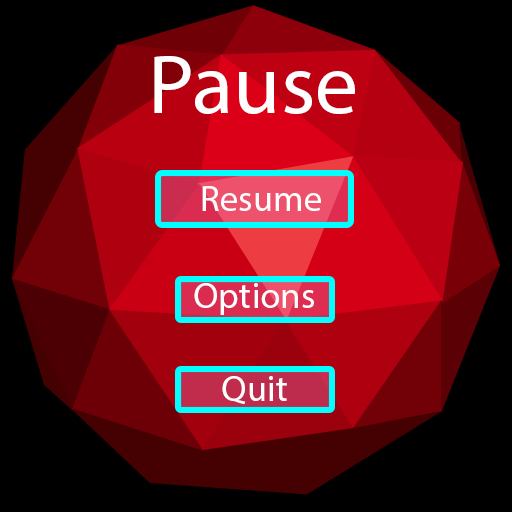
<style>
.page{position:relative;width:512px;height:512px;background:#000000}
.page>*{position:absolute;margin:0}
.t1{font:84.6px "MyriadPro-Regular";color:#ffffff}
.t2{font:36.6px "MyriadPro-Regular";color:#ffffff}
</style>
<div class="page">
<p class="t1" style="left:154px;top:56px;width:201px;height:58px">Pause</p>
<p class="t2" style="left:202px;top:186px;width:119px;height:25px">Resume</p>
<p class="t2" style="left:194px;top:283px;width:120px;height:32px">Options</p>
<p class="t2" style="left:222px;top:376px;width:65px;height:29px">Quit</p>
</div>
